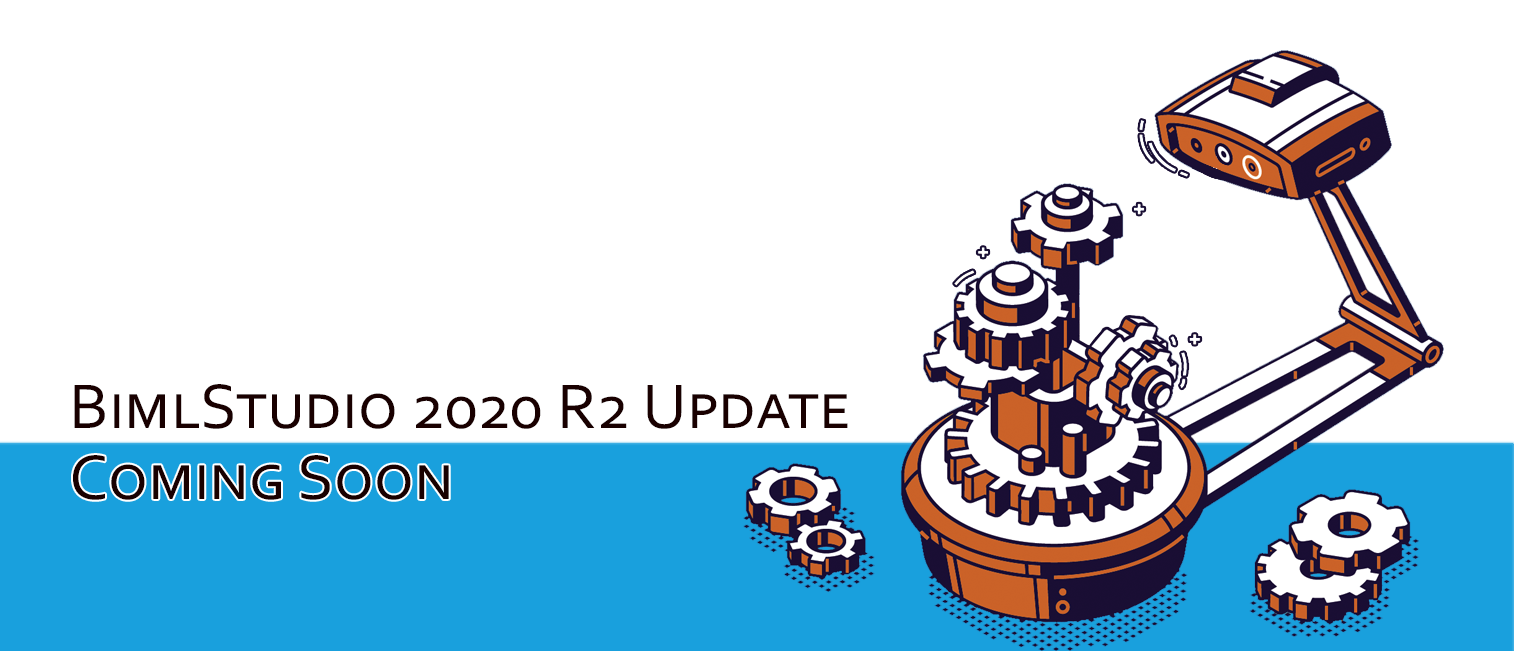
<style>
.page{position:relative;width:1514px;height:651px;background:#ffffff}
.page>*{position:absolute;margin:0}
.t1{font:66px "Corbel";color:#190000;font-variant:small-caps}
</style>
<div class="page">
<p class="t1" style="left:74px;top:384px;width:774px;height:45px">BimlStudio 2020 R2 Update</p>
<p class="t1" style="left:73px;top:455px;width:376px;height:45px">Coming Soon</p>
</div>
